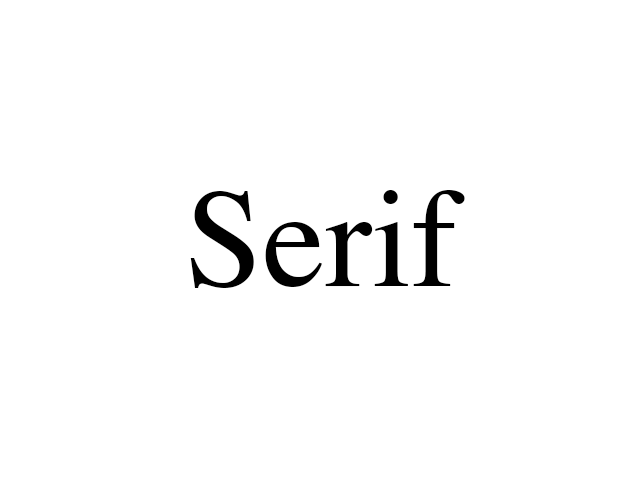
<style>
.page{position:relative;width:640px;height:480px;background:#ffffff}
.page>*{position:absolute;margin:0}
.t1{font:140px "Times-Roman";color:#000000}
</style>
<div class="page">
<p class="t1" style="left:190px;top:190px;width:275px;height:98px">Serif</p>
</div>
